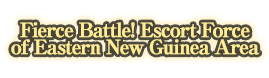
<style>
.page{position:relative;width:269px;height:78px;background:#ffffff}
.page>*{position:absolute;margin:0}
.t1{font:20px/17px "RyuminPro-ExBold";letter-spacing:-0.08em;color:#ffed96;font-weight:bold}
</style>
<div class="page">
<p class="t1" style="left:11px;top:22px;width:249px;height:33px;text-align:center">Fierce Battle! Escort Force<br>of Eastern New Guinea Area</p>
</div>
